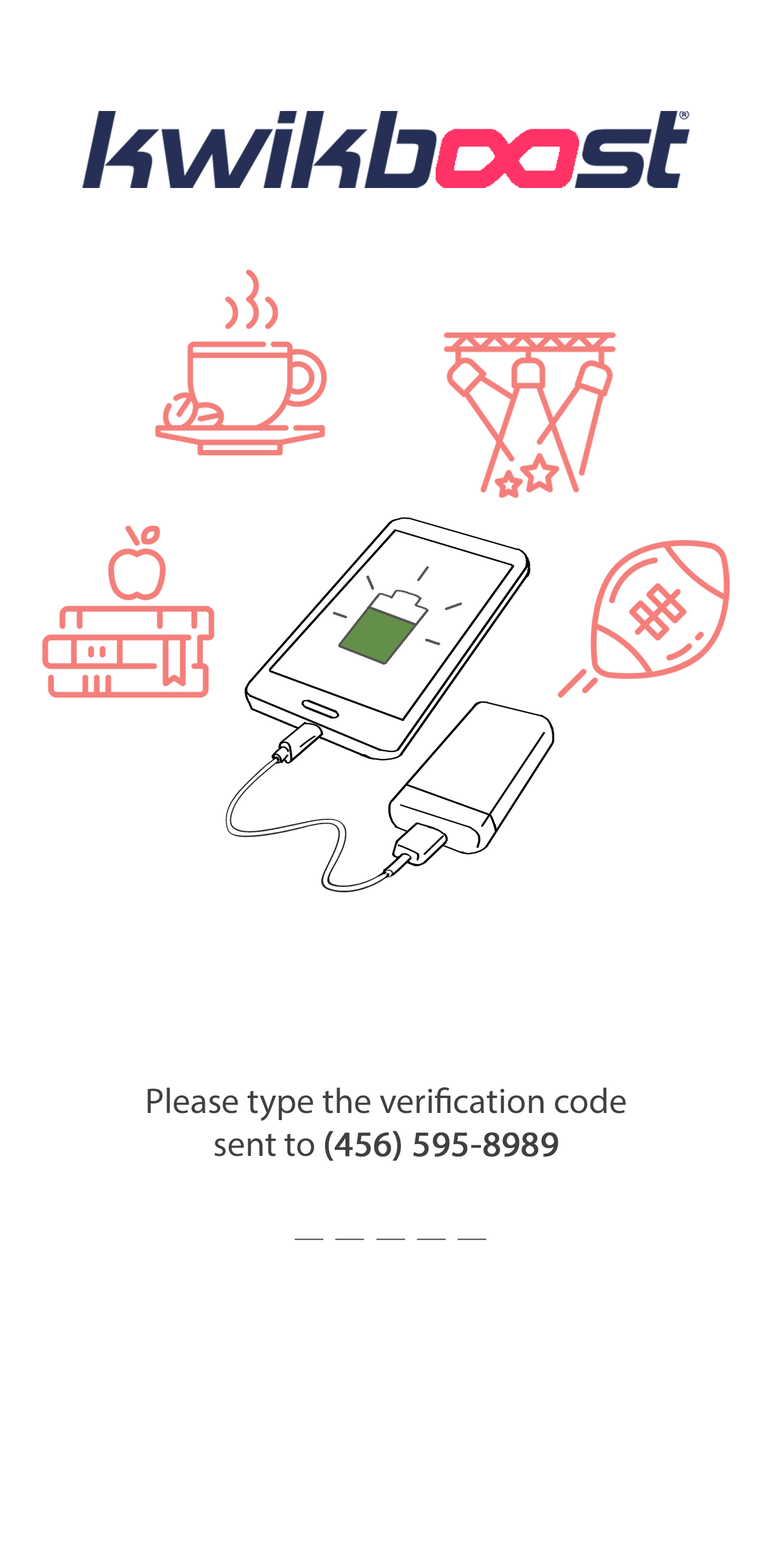
<style>
.page{position:relative;width:772px;height:1545px;background:#ffffff}
.page>*{position:absolute;margin:0}
.t1{font:35.8px "MyriadPro-Regular";color:#404040}
.t2{font:35.8px "MyriadPro-Regular";color:#404040;font-weight:bold}
.t3{font:28.6px "MyriadPro-Regular";color:#606060}
</style>
<div class="page">
<p class="t1" style="left:147px;top:1087px;width:479px;height:73px;text-align:center">Please type the verification code <br>sent to <span class="t2">(456) 595-8989</span></p>
<p class="t3" style="left:295px;top:1238px;width:191px;height:2px">__  __  __  __  __</p>
</div>
